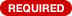
<style>
.page{position:relative;width:72px;height:16px;background:#cc0000}
.page>*{position:absolute;margin:0}
.t1{font:10.7px "HelveticaNeue-Bold";color:#ffffff}
</style>
<div class="page">
<p class="t1" style="left:8px;top:4px;width:56px;height:9px">REQUIRED</p>
</div>
